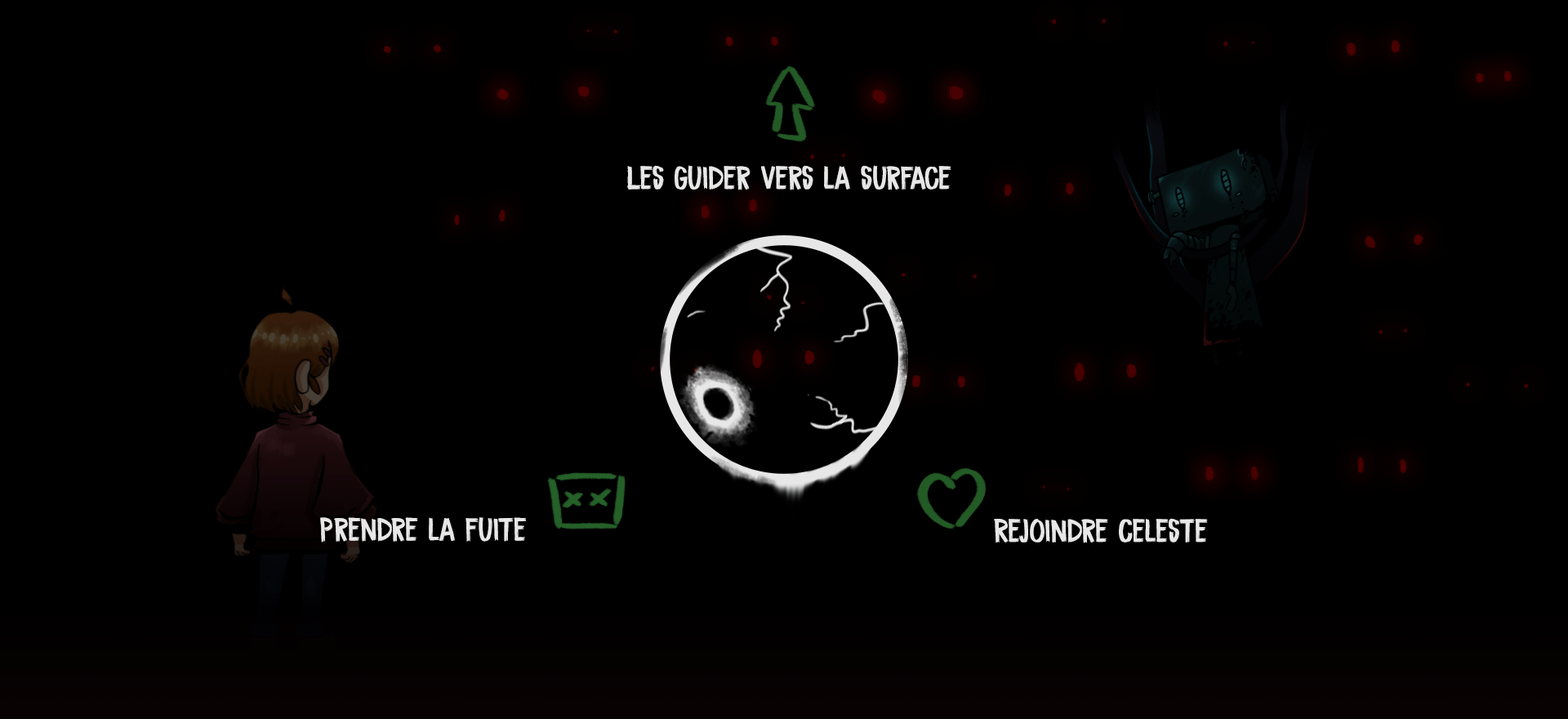
<style>
.page{position:relative;width:1568px;height:719px;background:#000000}
.page>*{position:absolute;margin:0}
.t1{font:32.7px "DKCoalBrush-Regular";color:#e7e7e7}
</style>
<div class="page">
<p class="t1" style="left:627px;top:165px;width:324px;height:25px">Les guider vers la surface</p>
<p class="t1" style="left:320px;top:517px;width:207px;height:25px">Prendre la fuite</p>
<p class="t1" style="left:994px;top:518px;width:214px;height:25px">Rejoindre Celeste</p>
</div>
